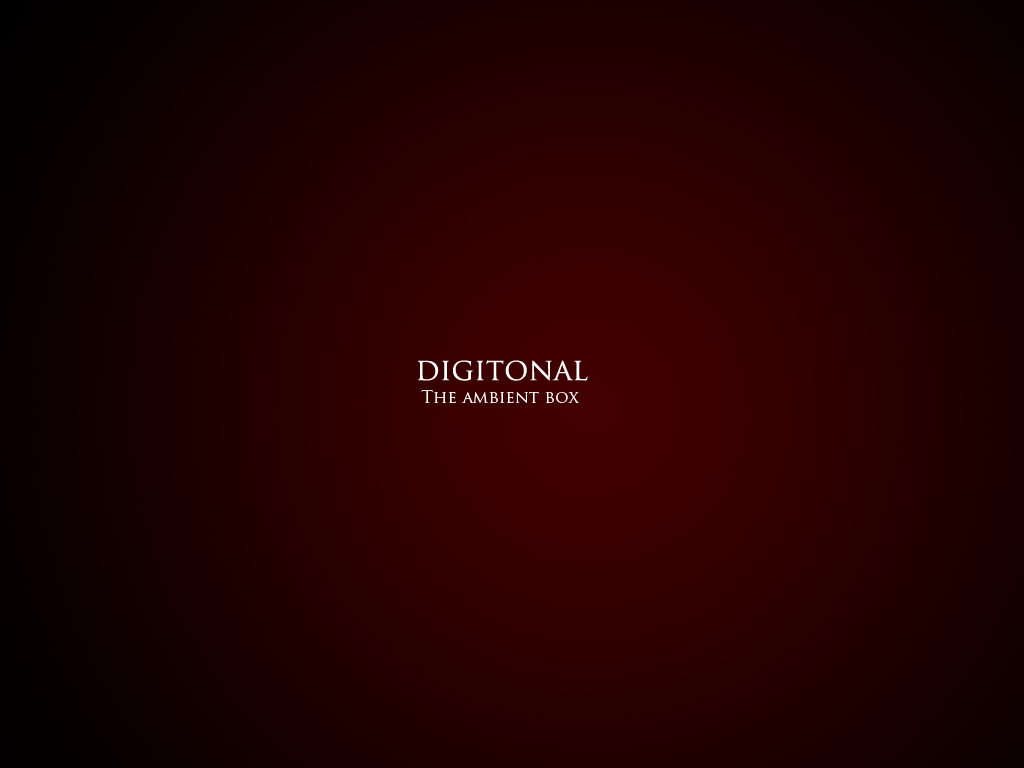
<style>
.page{position:relative;width:1024px;height:768px}
.page>*{position:absolute;margin:0}
.t1{font:30px "TrajanPro-Regular";color:#ffffff}
.t2{font:16.9px "TrajanPro-Regular";color:#ffffff}
</style>
<div class="page">
<p class="t1" style="left:417px;top:360px;width:171px;height:21px">digitonal</p>
<p class="t2" style="left:421px;top:390px;width:158px;height:13px">The ambient box</p>
</div>
